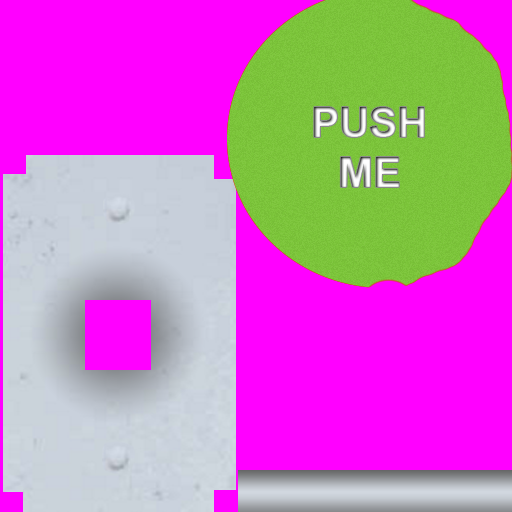
<style>
.page{position:relative;width:512px;height:512px;background:#ff00ff}
.page>*{position:absolute;margin:0}
.t1{font:42px "Arial-BoldMT"}
</style>
<div class="page">
<p class="t1" style="left:314px;top:107px;width:110px;height:80px;text-align:center">PUSH<br>ME</p>
</div>
